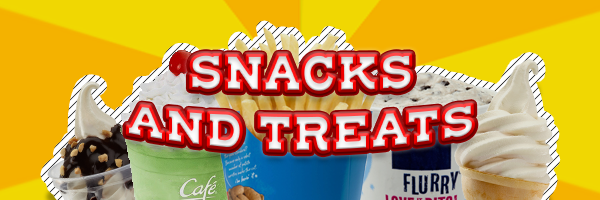
<style>
.page{position:relative;width:600px;height:200px;background:#f4b200}
.page>*{position:absolute;margin:0}
.t1{font:41.7px "HendersonSlabBasicBlack"}
</style>
<div class="page">
<p class="t1" style="left:127px;top:54px;width:347px;height:99px;text-align:center">SNACKS<br>AND TREATS</p>
</div>
